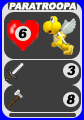
<style>
.page{position:relative;width:84px;height:120px;background:#3d3d3d}
.page>*{position:absolute;margin:0}
.t1{font:9px "Arial-Black";color:#ffffff;font-style:italic}
.t2{font:13px "Arial-Black";color:#020202;font-style:italic}
</style>
<div class="page">
<p class="t1" style="left:9px;top:2px;width:67px;height:8px">PARATROOPA</p>
<p class="t2" style="left:18px;top:28px;width:9px;height:11px">6</p>
<p class="t2" style="left:67px;top:65px;width:9px;height:11px">3</p>
<p class="t2" style="left:66px;top:94px;width:9px;height:11px">8</p>
</div>
